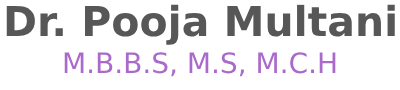
<style>
.page{position:relative;width:400px;height:90px;background:#ffffff}
.page>*{position:absolute;margin:0}
.t1{font:41px "DejaVuSans-Bold";color:#585758}
.t2{font:28px "DejaVuSans";color:#aa6acb}
</style>
<div class="page">
<p class="t1" style="left:6px;top:4px;width:389px;height:41px">Dr. Pooja Multani</p>
<p class="t2" style="left:64px;top:52px;width:272px;height:25px">M.B.B.S, M.S, M.C.H</p>
</div>
